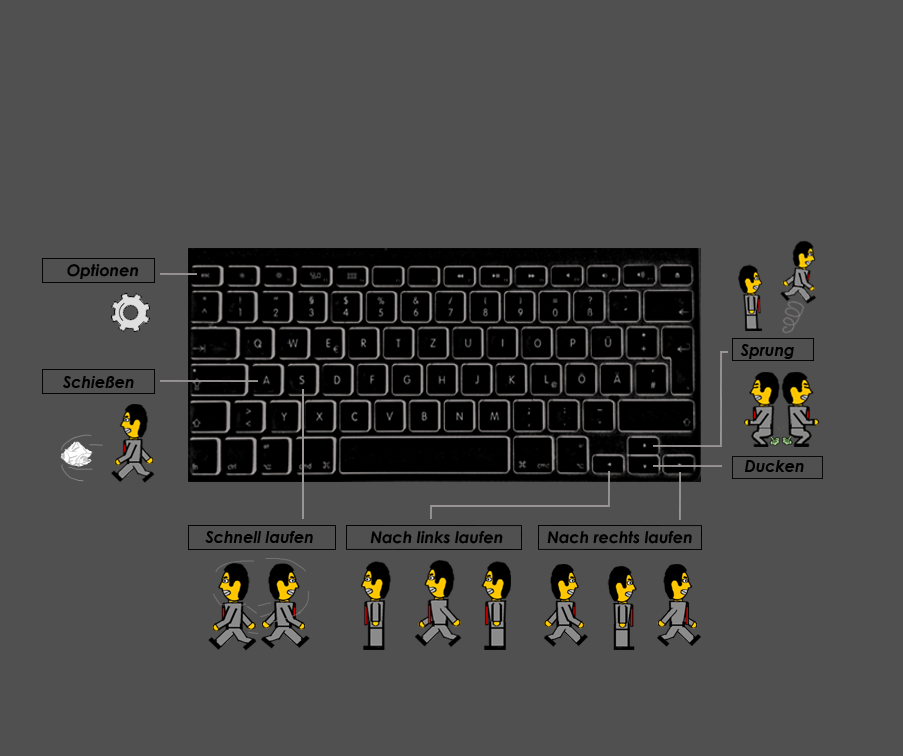
<style>
.page{position:relative;width:903px;height:756px;background:#505050}
.page>*{position:absolute;margin:0}
.t1{font:12px "CenturyGothic-BoldItalic";color:#000000}
.t2{font:16.1px "CenturyGothic-BoldItalic";color:#000000}
</style>
<div class="page">
<p class="t1" style="left:67px;top:264px;width:72px;height:16px">Optionen</p>
<p class="t1" style="left:740px;top:344px;width:54px;height:15px">Sprung</p>
<p class="t1" style="left:63px;top:376px;width:71px;height:12px">Schießen</p>
<p class="t1" style="left:744px;top:460px;width:60px;height:12px">Ducken</p>
<p class="t1" style="left:205px;top:531px;width:108px;height:12px">Schnell laufen</p>
<p class="t1" style="left:370px;top:530px;width:133px;height:14px">Nach links laufen</p>
<p class="t2" style="left:547px;top:530px;width:145px;height:14px">Nach rechts laufen</p>
</div>
